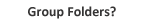
<style>
.page{position:relative;width:144px;height:23px;background:#ffffff}
.page>*{position:absolute;margin:0}
.t1{font:14px "Calibri-Bold";color:#363535}
</style>
<div class="page">
<p class="t1" style="left:28px;top:6px;width:88px;height:13px">Group Folders?</p>
</div>
